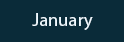
<style>
.page{position:relative;width:124px;height:42px;background:#0a2b39}
.page>*{position:absolute;margin:0}
.t1{font:18.5px "MyriadPro-Regular";color:#f0f9ff}
</style>
<div class="page">
<p class="t1" style="left:32px;top:13px;width:61px;height:17px">January</p>
</div>
